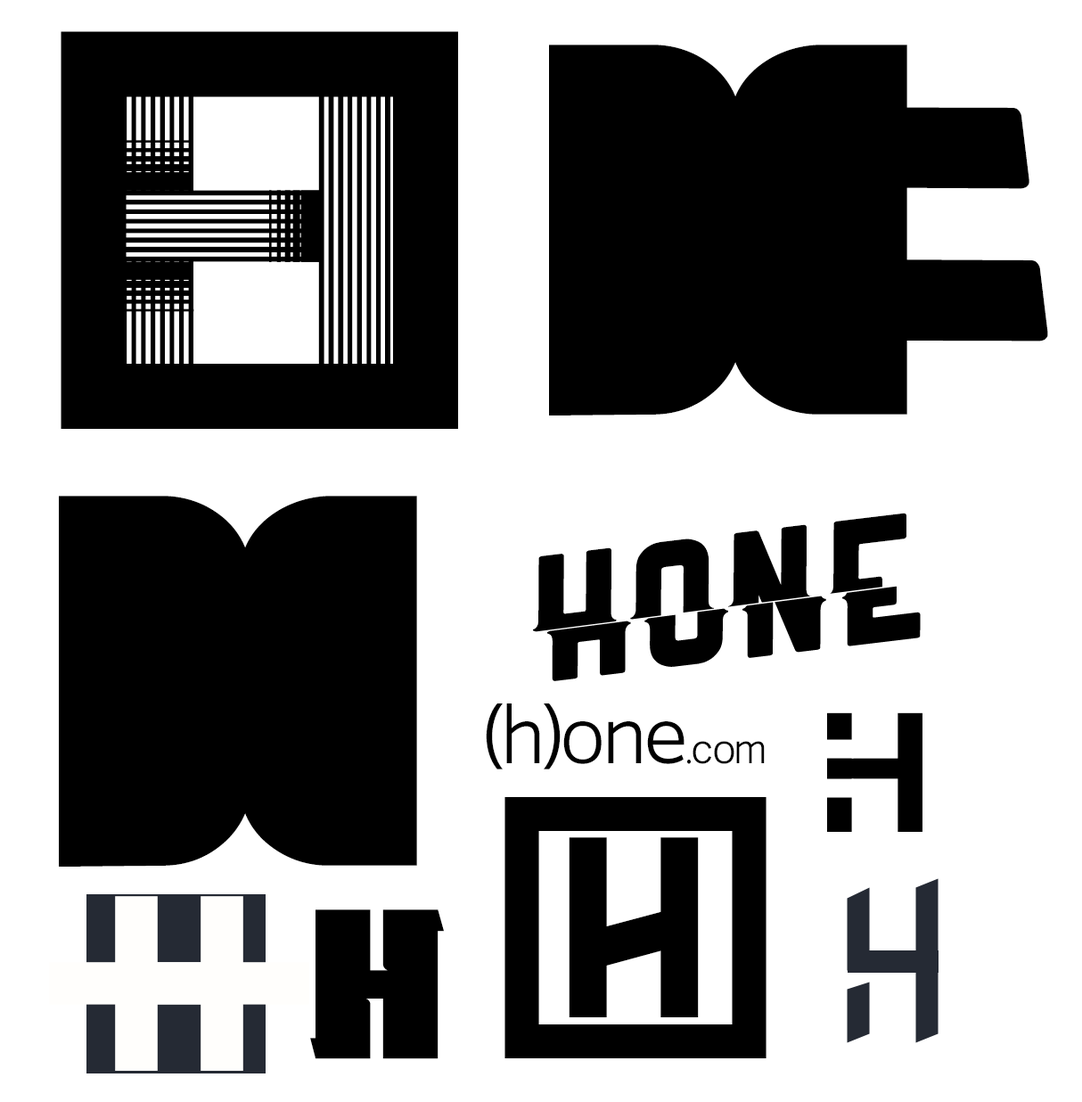
<style>
.page{position:relative;width:1082px;height:1102px;background:#ffffff}
.page>*{position:absolute;margin:0}
.t1{font:529.5px "Tozuna";letter-spacing:0.01em;color:#000000}
.t2{font:529.5px "TribbonB";letter-spacing:0.01em;color:#000000}
.t3{font:529.5px "Ranger";letter-spacing:0.01em;color:#000000}
.t4{font:529.5px "TribbonC";letter-spacing:0.01em;color:#000000}
.t5{font:164.9px "Ranger";letter-spacing:0.01em;color:#000000}
.t6{font:80.2px "VoiceOS-Book";letter-spacing:-0.045em;color:#000000}
.t7{font:41.9px "VoiceOS-Book";letter-spacing:-0.045em;color:#000000}
.t8{font:164.9px "Helvetica-Bold";letter-spacing:0.01em;color:#000000;text-transform:uppercase}
.t9{font:299.4px "Bender";letter-spacing:0.01em;color:#000000;text-transform:uppercase}
.t10{font:330px "Helvetica-Bold";letter-spacing:0.01em;color:#fffefc;text-transform:uppercase}
.t11{font:211.7px "BrokenRecords45";letter-spacing:0.01em;color:#000000;text-transform:uppercase}
</style>
<div class="page">
<p class="t1" style="left:549px;top:45px;width:358px;height:370px">H</p>
<p class="t2" style="left:122px;top:60px;width:268px;height:339px">H</p>
<p class="t3" style="left:630px;top:89px;width:418px;height:268px;rotate:83deg">H</p>
<p class="t4" style="left:121px;top:140px;width:198px;height:172px">H</p>
<p class="t4" style="left:121px;top:140px;width:198px;height:172px">H</p>
<p class="t1" style="left:59px;top:496px;width:358px;height:370px">H</p>
<p class="t5" style="left:533px;top:513px;width:374px;height:165px;rotate:-7deg">hone</p>
<p class="t6" style="left:486px;top:703px;width:279px;height:66px">(h)one<span class="t7">.com</span></p>
<p class="t8" style="left:827px;top:712px;width:96px;height:120px">h</p>
<p class="t9" style="left:569px;top:837px;width:130px;height:180px">H</p>
<p class="t10" style="left:49px;top:896px;width:175px;height:175px">+</p>
<p class="t10" style="left:135px;top:896px;width:174px;height:175px">+</p>
<p class="t11" style="left:310px;top:909px;width:134px;height:150px">h</p>
</div>
